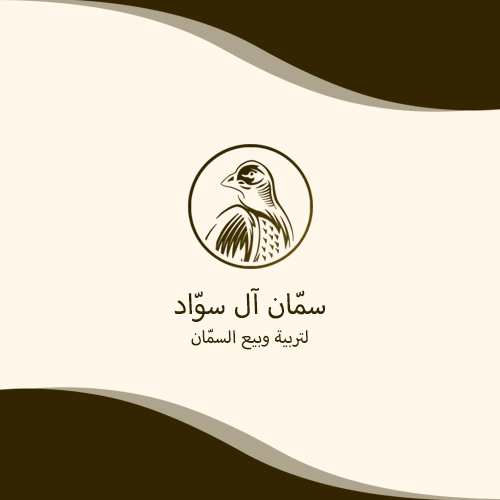
<style>
.page{position:relative;width:500px;height:500px;background:#fff7ea}
.page>*{position:absolute;margin:0}
.t1{font:24px "MyriadArabic-Regular";color:#322500}
.t2{font:40px "MyriadArabic-Regular";color:#322500}
</style>
<div class="page">
<p class="t1" style="left:174px;top:288px;width:151px;height:62px;text-align:center"><span class="t2">سمّان آل سوّاد<br></span>لتربية وبيع السمّان</p>
</div>
